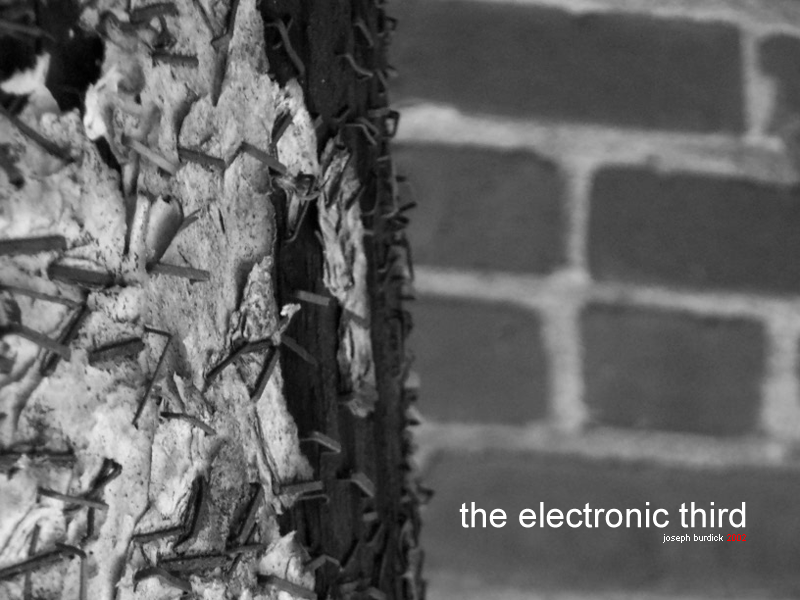
<style>
.page{position:relative;width:800px;height:600px}
.page>*{position:absolute;margin:0}
.t1{font:35.3px "ArialMT";color:#ffffff}
.t2{font:9px "ArialMT";color:#ffffff}
.t3{font:9px "ArialMT";color:#ff0000}
</style>
<div class="page">
<p class="t1" style="left:459px;top:502px;width:287px;height:26px">the electronic third</p>
<p class="t2" style="left:663px;top:534px;width:83px;height:9px">joseph burdick <span class="t3">2002</span></p>
</div>
